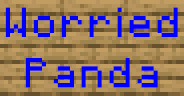
<style>
.page{position:relative;width:184px;height:96px}
.page>*{position:absolute;margin:0}
.t1{font:42px "Minecraft-Regular";letter-spacing:0.1em;color:#0000ff;scale:0.95 1}
</style>
<div class="page">
<p class="t1" style="left:5px;top:7px;width:173px;height:81px;text-align:center">Worried<br>Panda</p>
</div>
